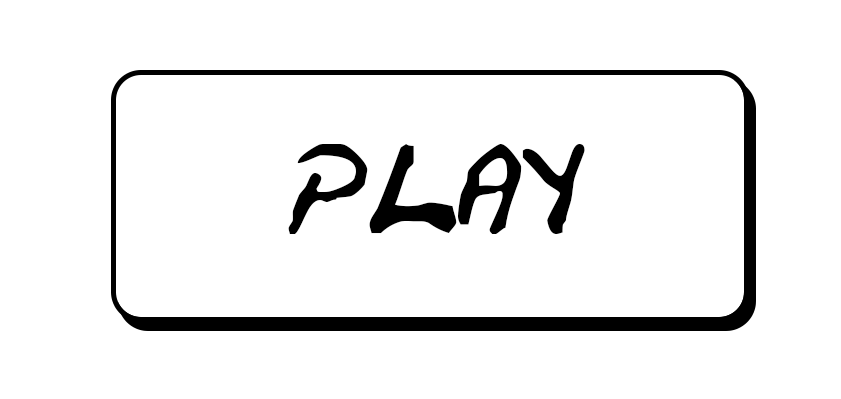
<style>
.page{position:relative;width:841px;height:399px;background:#ffffff}
.page>*{position:absolute;margin:0}
.t1{font:125px "CrackedJohnnie";color:#000000}
</style>
<div class="page">
<p class="t1" style="left:288px;top:144px;width:297px;height:90px">play</p>
</div>
